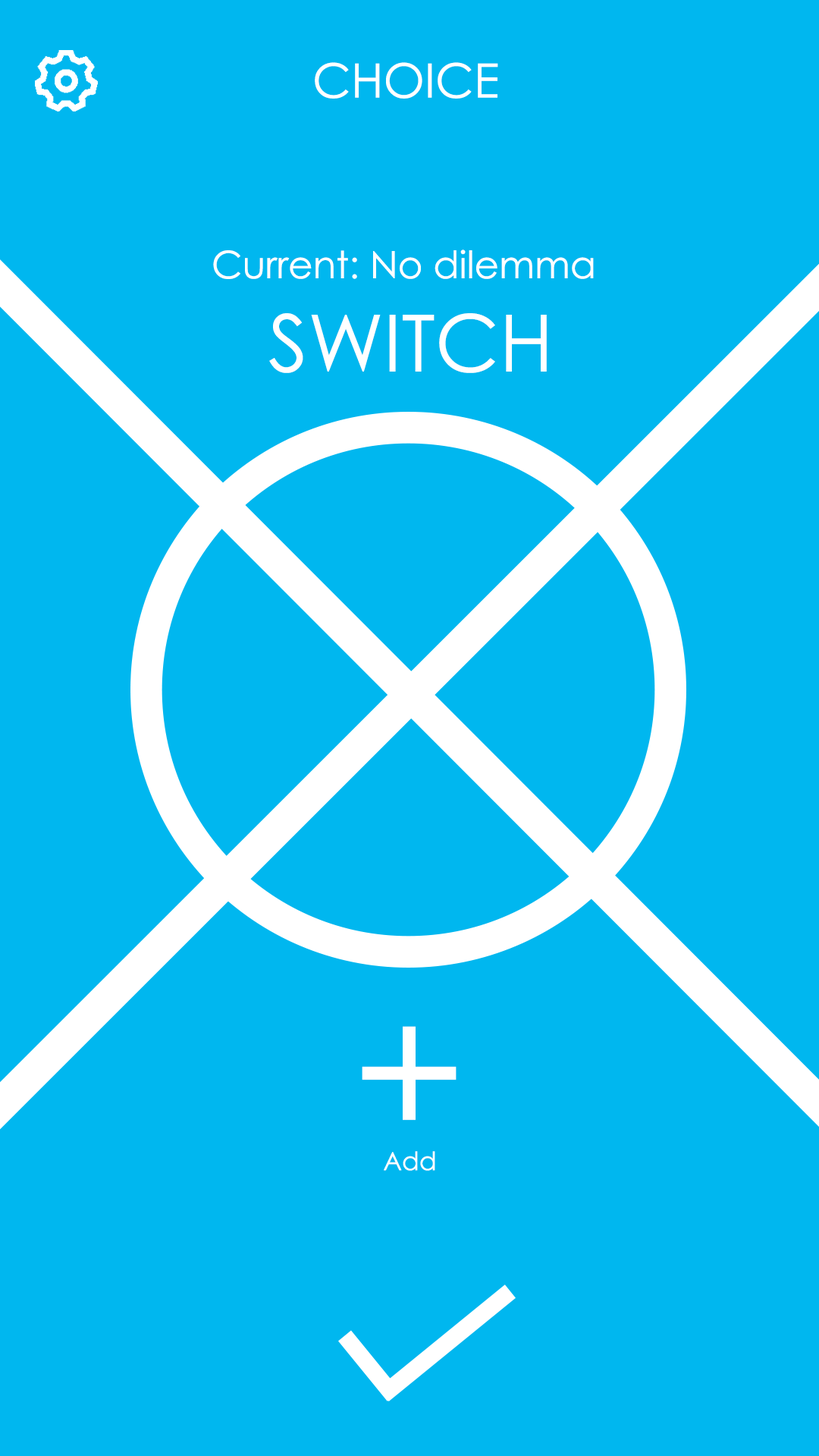
<style>
.page{position:relative;width:819px;height:1456px;background:#00b7ef}
.page>*{position:absolute;margin:0}
.t1{font:47.4px "CenturyGothic";color:#ffffff}
.t2{font:9.1px "CenturyGothic";color:#ffffff}
.t3{font:79px "CenturyGothic";color:#ffffff}
.t4{font:189.6px "CenturyGothic";color:#ffffff}
.t5{font:25.3px "CenturyGothic";color:#ffffff}
</style>
<div class="page">
<p class="t1" style="left:315px;top:62px;width:183px;height:37px">CHOICE</p>
<p class="t2" style="left:213px;top:249px;width:381px;height:30px">Current: No dilemma</p>
<p class="t3" style="left:269px;top:313px;width:278px;height:60px">SWITCH</p>
<p class="t4" style="left:362px;top:1026px;width:95px;height:94px">+</p>
<p class="t5" style="left:384px;top:1151px;width:51px;height:20px">Add</p>
</div>
